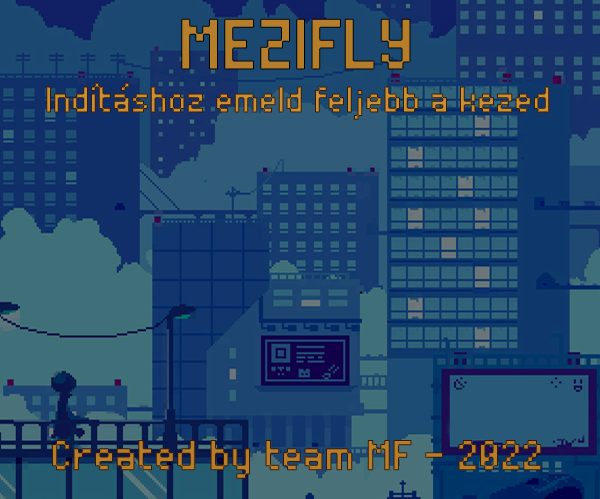
<style>
.page{position:relative;width:600px;height:499px}
.page>*{position:absolute;margin:0}
.t1{font:62.5px "Peepo";color:#b67e2b;font-weight:bold}
.t2{font:32.1px "Peepo";font-weight:bold}
.t3{font:37.5px "Peepo";font-weight:bold}
</style>
<div class="page">
<p class="t1" style="left:181px;top:18px;width:230px;height:52px">MEZIFLY</p>
<p class="t2" style="left:46px;top:82px;width:504px;height:38px">Indításhoz emeld feljebb a kezed</p>
<p class="t3" style="left:52px;top:440px;width:490px;height:39px">Created by team MF - 2022</p>
</div>
